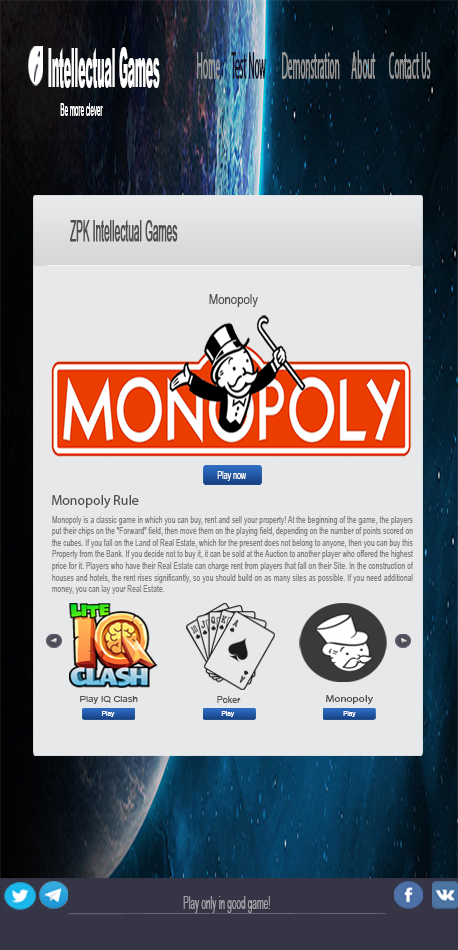
<style>
.page{position:relative;width:458px;height:950px;background:#e7e8ea}
.page>*{position:absolute;margin:0}
.t1{font:58.9px "FreeportPlain";color:#1f1f31;scale:0.39 1}
.t2{font:53.9px "Arial-Black";color:#ffffff;scale:0.2 1}
.t3{font:53.9px "MyriadPro-Regular";color:#ffffff;scale:0.2 1}
.t4{font:39.8px "MyriadPro-Regular";color:#979797;scale:0.23 1}
.t5{font:39.8px "MyriadPro-Regular";color:#161628;scale:0.23 1}
.t6{font:18.2px "ArialMT";color:#ffffff;scale:0.34 1}
.t7{font:29.8px "ArialNarrow";color:#505050;font-weight:bold;scale:0.39 1}
.t8{font:14.2px "ArialNarrow";color:#505050}
.t9{font:11.2px "ArialNarrow";color:#ffffff;scale:0.77 1}
.t10{font:14.2px "MyriadPro-Regular";color:#505050}
.t11{font:9.7px "ArialNarrow";color:#828181;scale:0.86 1}
.t12{font:9px "ArialNarrow";color:#505050;scale:1.29 1}
.t13{font:9.9px "ArialNarrow";color:#505050;scale:1.11 1}
.t14{font:9.9px "MyriadPro-Regular";color:#505050;scale:1.11 1}
.t15{font:7px "ArialNarrow";color:#ffffff;scale:1.11 1}
.t16{font:18.2px "ArialNarrow";color:#a6a6ab;scale:0.55 1}
</style>
<div class="page">
<p class="t1" style="left:34px;top:51px;width:6px;height:31px">i</p>
<p class="t2" style="left:48px;top:47px;width:112px;height:41px"><span class="t3"> </span>Intellectual Games</p>
<p class="t4" style="left:197px;top:50px;width:234px;height:29px">Home     <span class="t5"> Test Now        </span>Demonstration      About       Contact Us</p>
<p class="t6" style="left:60px;top:103px;width:43px;height:13px">Be more clever</p>
<p class="t7" style="left:70px;top:220px;width:108px;height:22px">ZPK Intellectual Games</p>
<p class="t8" style="left:209px;top:294px;width:49px;height:13px">Monopoly</p>
<p class="t9" style="left:217px;top:471px;width:29px;height:10px">Play now</p>
<p class="t10" style="left:52px;top:495px;width:87px;height:14px">Monopoly Rule</p>
<p class="t11" style="left:52px;top:516px;width:362px;height:78px;text-align:justify">Monopoly is a classic game in which you can buy, rent and sell your property! At the beginning of the game, the players put their chips on the "Forward" field, then move them on the playing field, depending on the number of points scored on the cubes. If you fall on the Land of Real Estate, which for the present does not belong to anyone, then you can buy this Property from the Bank. If you decide not to buy it, it can be sold at the Auction to another player who offered the highest price for it. Players who have their Real Estate can charge rent from players that fall on their Site. In the construction of houses and hotels, the rent rises significantly, so you should build on as many sites as possible. If you need additional money, you can lay your Real Estate.</p>
<p class="t12" style="left:80px;top:696px;width:58px;height:8px">Play IQ Clash</p>
<p class="t13" style="left:217px;top:696px;width:24px;height:7px">Poker</p>
<p class="t14" style="left:326px;top:695px;width:47px;height:10px">Monopoly</p>
<p class="t15" style="left:102px;top:711px;width:13px;height:6px">Play</p>
<p class="t15" style="left:221px;top:711px;width:13px;height:6px">Play</p>
<p class="t15" style="left:343px;top:711px;width:13px;height:6px">Play</p>
<p class="t16" style="left:183px;top:896px;width:87px;height:17px">Play only in good game!</p>
</div>
